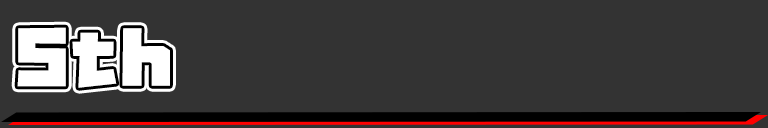
<style>
.page{position:relative;width:768px;height:128px;background:#333333}
.page>*{position:absolute;margin:0}
.t1{font:62.5px "GN-KMBFont-UB-OldstyleKana";letter-spacing:0.05em;color:#ffffff;scale:1.1 1}
.t2{font:62.5px "GN-KMBFont-UB-OldstyleKana";letter-spacing:0.05em;color:#ffffff}
</style>
<div class="page">
<p class="t1" style="left:17px;top:27px;width:153px;height:61px"><span class="t2">5</span>ｔｈ</p>
</div>
